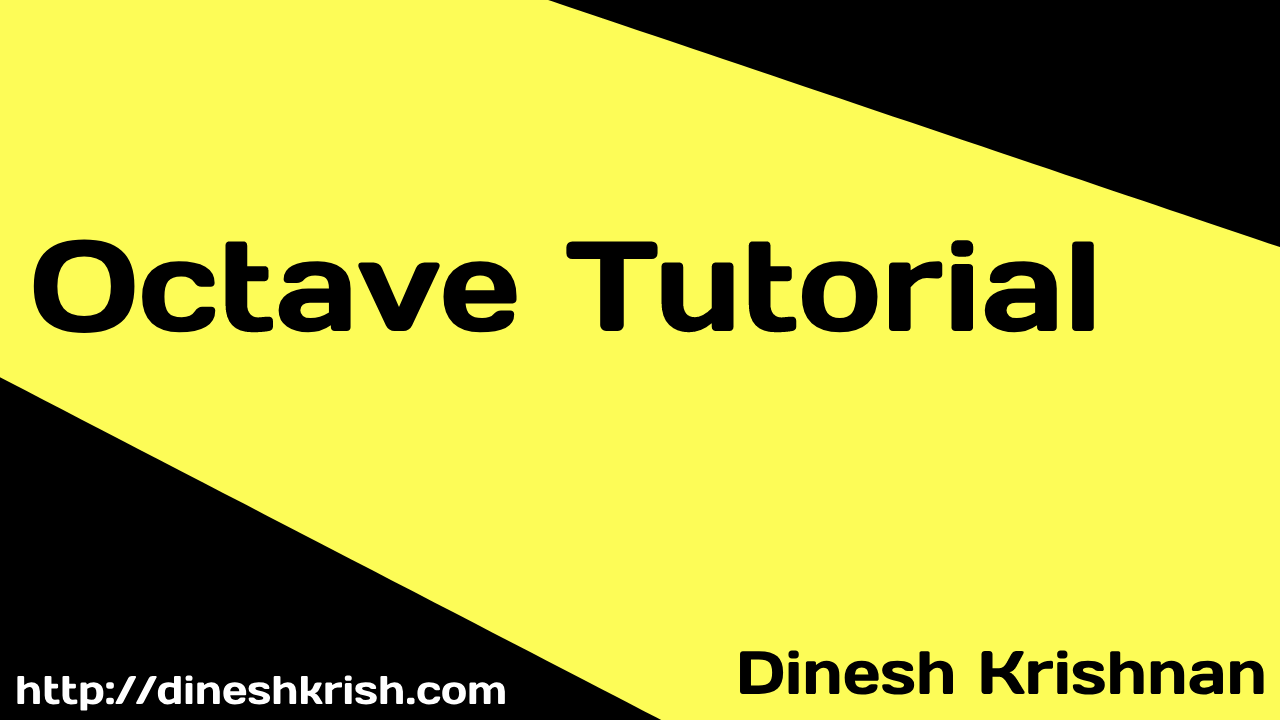
<style>
.page{position:relative;width:1280px;height:720px;background:#fdfc57}
.page>*{position:absolute;margin:0}
.t1{font:128px "DaysOne-Regular";color:#000000}
.t2{font:61.1px "DaysOne-Regular";color:#000000}
.t3{font:40px "DaysOne-Regular";color:#ffffff}
</style>
<div class="page">
<p class="t1" style="left:33px;top:239px;width:1061px;height:94px">Octave Tutorial</p>
<p class="t2" style="left:740px;top:650px;width:524px;height:45px">Dinesh Krishnan</p>
<p class="t3" style="left:17px;top:675px;width:488px;height:36px">http://dineshkrish.com</p>
</div>
